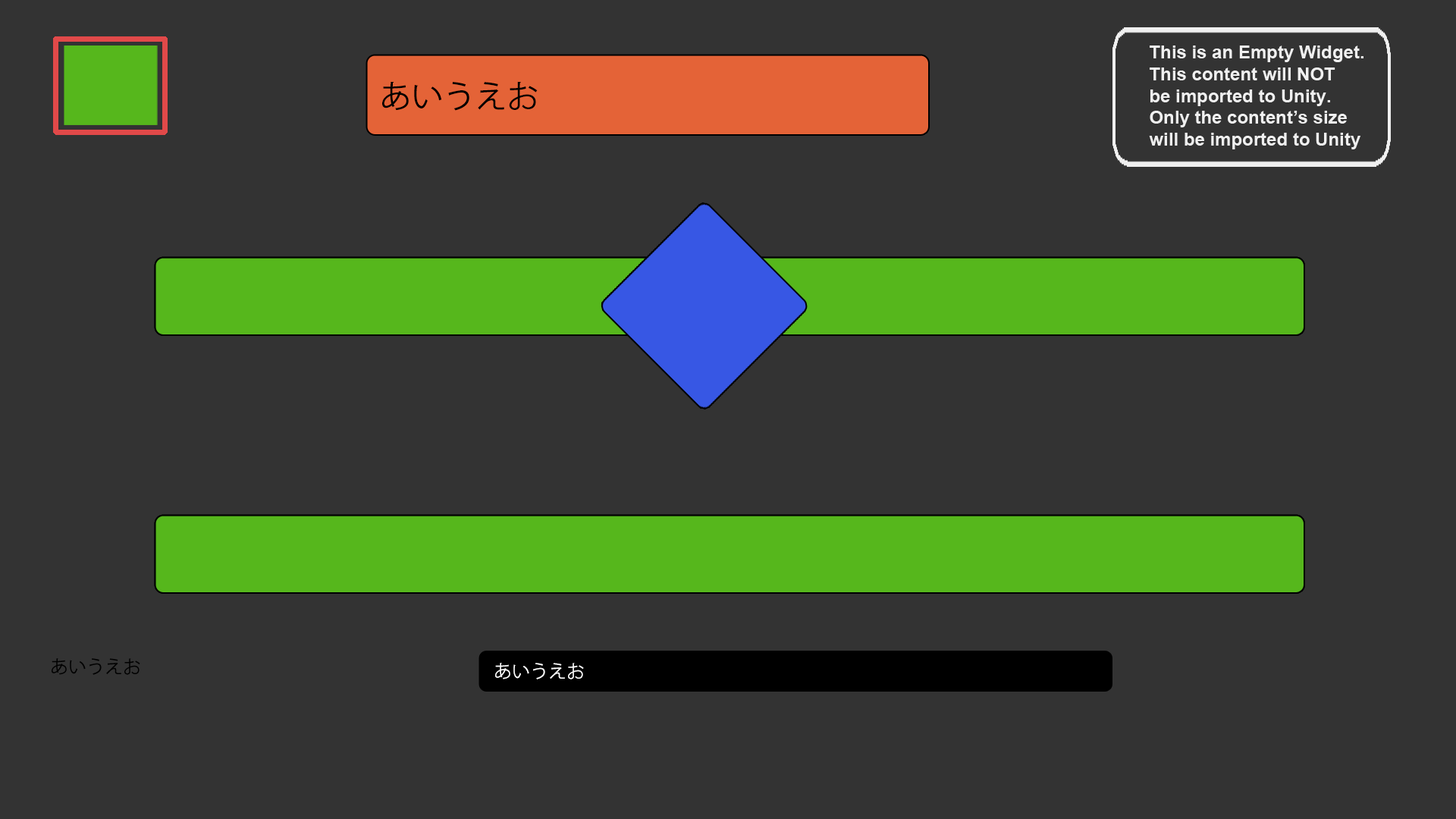
<style>
.page{position:relative;width:1456px;height:819px;background:#333333}
.page>*{position:absolute;margin:0}
.t1{font:18.2px "Arial-BoldMT";color:#f0f0f0}
.t2{font:31.8px "KozGoPr6N-Regular";color:#000000}
.t3{font:18.2px "KozGoPr6N-Regular";color:#000000}
.t4{font:18.2px "KozGoPr6N-Regular";color:#ffffff}
</style>
<div class="page">
<p class="t1" style="left:1149px;top:45px;width:214px;height:104px">This is an Empty Widget. <br>This content will NOT <br>be imported to Unity. <br>Only the content’s size<br>will be imported to Unity</p>
<p class="t2" style="left:382px;top:81px;width:156px;height:30px">あいうえお</p>
<p class="t3" style="left:52px;top:658px;width:88px;height:17px">あいうえお</p>
<p class="t4" style="left:495px;top:663px;width:89px;height:16px">あいうえお</p>
</div>
